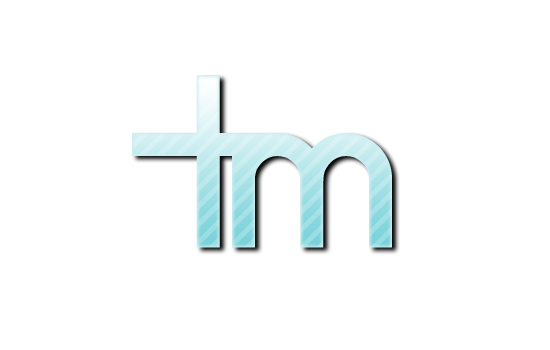
<style>
.page{position:relative;width:550px;height:350px;background:#ffffff}
.page>*{position:absolute;margin:0}
.t1{font:200px "StarAvenue"}
</style>
<div class="page">
<p class="t1" style="left:132px;top:75px;width:260px;height:173px">Tm</p>
</div>
